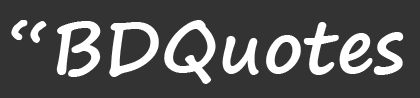
<style>
.page{position:relative;width:420px;height:98px;background:#333333}
.page>*{position:absolute;margin:0}
.t1{font:72px "SegoePrint-Bold";color:#ffffff}
</style>
<div class="page">
<p class="t1" style="left:11px;top:20px;width:393px;height:64px">“BDQuotes</p>
</div>
